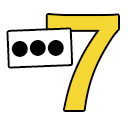
<style>
.page{position:relative;width:128px;height:128px;background:#ffffff}
.page>*{position:absolute;margin:0}
.t1{font:118.4px "HiraKakuProN-W6";color:#f5d733}
.t2{font:45.7px "HiraKakuProN-W6";color:#ffffff;scale:1.77 1}
.t3{font:18px "HiraKakuProN-W3";color:#000000}
</style>
<div class="page">
<p class="t1" style="left:47px;top:15px;width:71px;height:95px">7</p>
<p class="t2" style="left:8px;top:29px;width:63px;height:38px;rotate:-2deg">■</p>
<p class="t3" style="left:11px;top:39px;width:53px;height:18px;rotate:-1deg">●●●</p>
</div>
